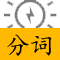
<style>
.page{position:relative;width:60px;height:60px;background:#ffb901}
.page>*{position:absolute;margin:0}
.t1{font:24px "¿¬Ìå";color:#000000}
</style>
<div class="page">
<p class="t1" style="left:7px;top:34px;width:45px;height:22px">分词</p>
</div>
